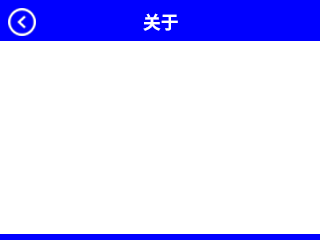
<style>
.page{position:relative;width:320px;height:240px;background:#ffffff}
.page>*{position:absolute;margin:0}
.t1{font:18px "SourceHanSansSC-Bold";color:#ffffff}
</style>
<div class="page">
<p class="t1" style="left:143px;top:13px;width:35px;height:18px">关于</p>
</div>
